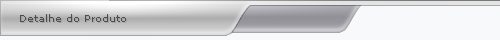
<style>
.page{position:relative;width:500px;height:40px;background:#f7f9fa}
.page>*{position:absolute;margin:0}
.t1{font:10px "Verdana";color:#4d4d4d}
</style>
<div class="page">
<p class="t1" style="left:20px;top:14px;width:106px;height:8px">Detalhe do Produto</p>
</div>
